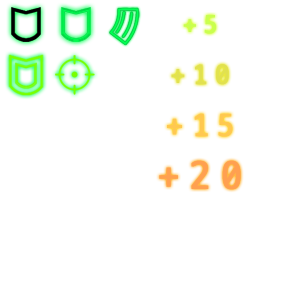
<style>
.page{position:relative;width:300px;height:300px;background:#ffffff}
.page>*{position:absolute;margin:0}
.t1{font:26px "D2Coding";letter-spacing:0.272em;color:#c8ff50;font-weight:bold}
.t2{font:28px "D2Coding";letter-spacing:0.272em;color:#e1e150;font-weight:bold}
.t3{font:32px "D2Coding";letter-spacing:0.272em;color:#ffc850;font-weight:bold}
.t4{font:40px "D2Coding";letter-spacing:0.272em;color:#ffa050;font-weight:bold}
</style>
<div class="page">
<p class="t1" style="left:183px;top:15px;width:33px;height:19px">+5</p>
<p class="t2" style="left:171px;top:64px;width:58px;height:21px">+10</p>
<p class="t3" style="left:167px;top:113px;width:66px;height:24px">+15</p>
<p class="t4" style="left:159px;top:160px;width:82px;height:30px">+20</p>
</div>
